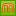
<style>
.page{position:relative;width:16px;height:16px;background:#5b9400}
.page>*{position:absolute;margin:0}
.t1{font:14px "PicoBlack"}
</style>
<div class="page">
<p class="t1" style="left:2px;top:2px;width:13px;height:11px">M</p>
</div>
